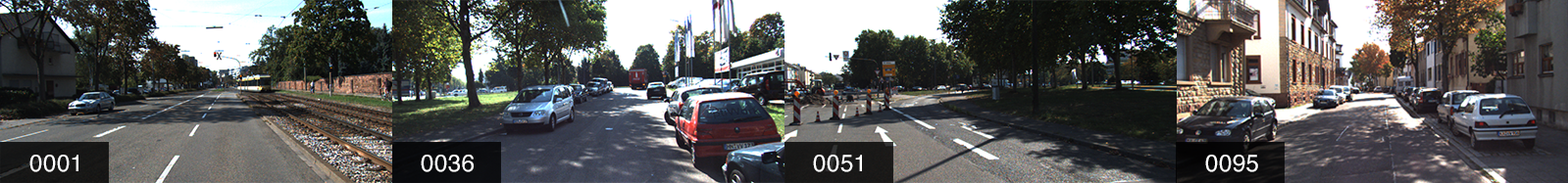
<style>
.page{position:relative;width:1568px;height:183px}
.page>*{position:absolute;margin:0}
.t1{font:23.5px "Helvetica";letter-spacing:0.025em;color:#ffffff}
</style>
<div class="page">
<p class="t1" style="left:29px;top:155px;width:49px;height:18px">0001</p>
<p class="t1" style="left:421px;top:155px;width:53px;height:18px">0036</p>
<p class="t1" style="left:813px;top:155px;width:49px;height:18px">0051</p>
<p class="t1" style="left:1205px;top:155px;width:53px;height:18px">0095</p>
</div>
